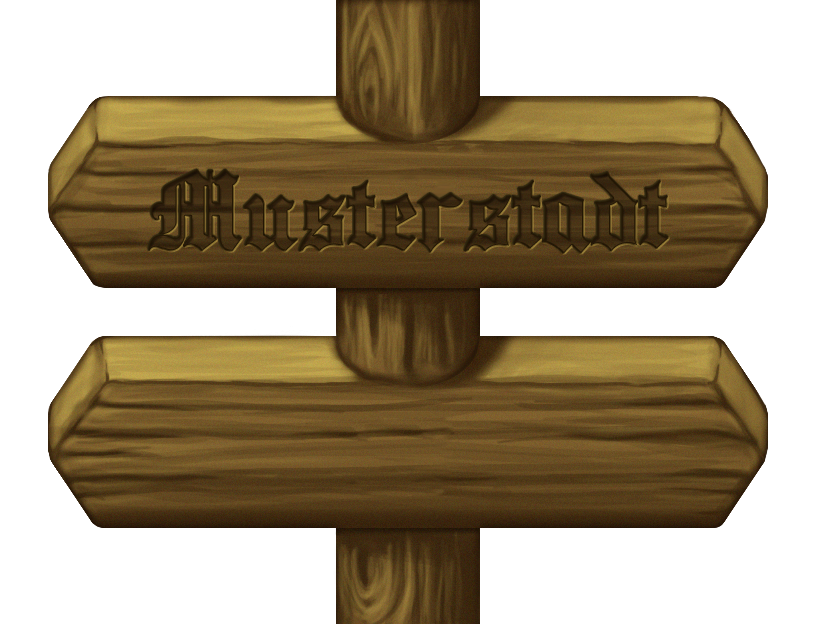
<style>
.page{position:relative;width:816px;height:624px;background:#ffffff}
.page>*{position:absolute;margin:0}
.t1{font:120px "Ancient-Medium";color:#3b2911}
</style>
<div class="page">
<p class="t1" style="left:149px;top:169px;width:520px;height:84px">Musterstadt</p>
</div>
